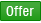
<style>
.page{position:relative;width:41px;height:23px}
.page>*{position:absolute;margin:0}
.t1{font:14px "HelveticaNeueLTCom-Cn";letter-spacing:0.04em;color:#ffffff}
</style>
<div class="page">
<p class="t1" style="left:6px;top:6px;width:28px;height:10px">Offer</p>
</div>
